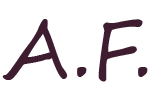
<style>
.page{position:relative;width:150px;height:100px;background:#ffffff}
.page>*{position:absolute;margin:0}
.t1{font:80px "SegoeScript";color:#3f1d31}
</style>
<div class="page">
<p class="t1" style="left:2px;top:19px;width:146px;height:63px">A.F.</p>
</div>
